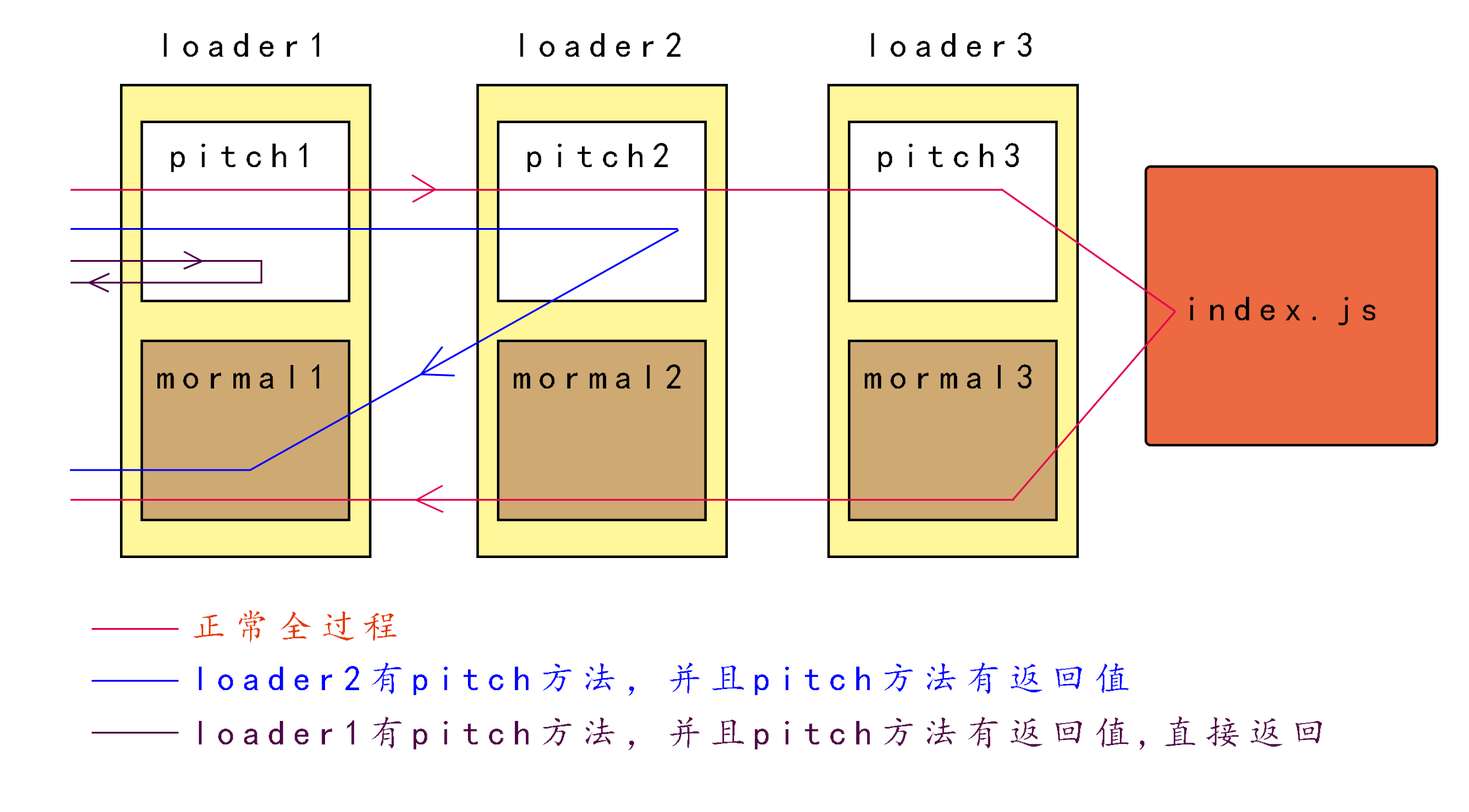
<style>
.page{position:relative;width:1469px;height:812px;background:#ffffff}
.page>*{position:absolute;margin:0}
.t1{font:35.2px/55.3px "¿¬Ìå";letter-spacing:0.22em;color:#000000}
.t2{font:35.2px "¿¬Ìå";letter-spacing:0.22em;color:#000000}
.t3{font:35.2px "¿¬Ìå";letter-spacing:0.22em;color:#e63600}
.t4{font:35.2px "¿¬Ìå";letter-spacing:0.22em;color:#0000ff}
.t5{font:35.2px "¿¬Ìå";letter-spacing:0.22em;color:#500047}
</style>
<div class="page">
<p class="t1" style="left:157px;top:33px;width:163px;height:355px;text-align:center">loader1<br><br>pitch1<br><br><br><br>mormal1</p>
<p class="t1" style="left:514px;top:33px;width:167px;height:355px;text-align:center">loader2<br><br>pitch2<br><br><br><br>mormal2</p>
<p class="t1" style="left:865px;top:33px;width:167px;height:355px;text-align:center">loader3<br><br>pitch3<br><br><br><br>mormal3</p>
<p class="t2" style="left:1190px;top:297px;width:186px;height:29px">index.js</p>
<p class="t3" style="left:193px;top:610px;width:204px;height:32px">正常全过程</p>
<p class="t4" style="left:198px;top:662px;width:931px;height:34px">loader2有pitch方法，并且pitch方法有返回值</p>
<p class="t5" style="left:198px;top:716px;width:1124px;height:34px">loader1有pitch方法，并且pitch方法有返回值,直接返回</p>
</div>
